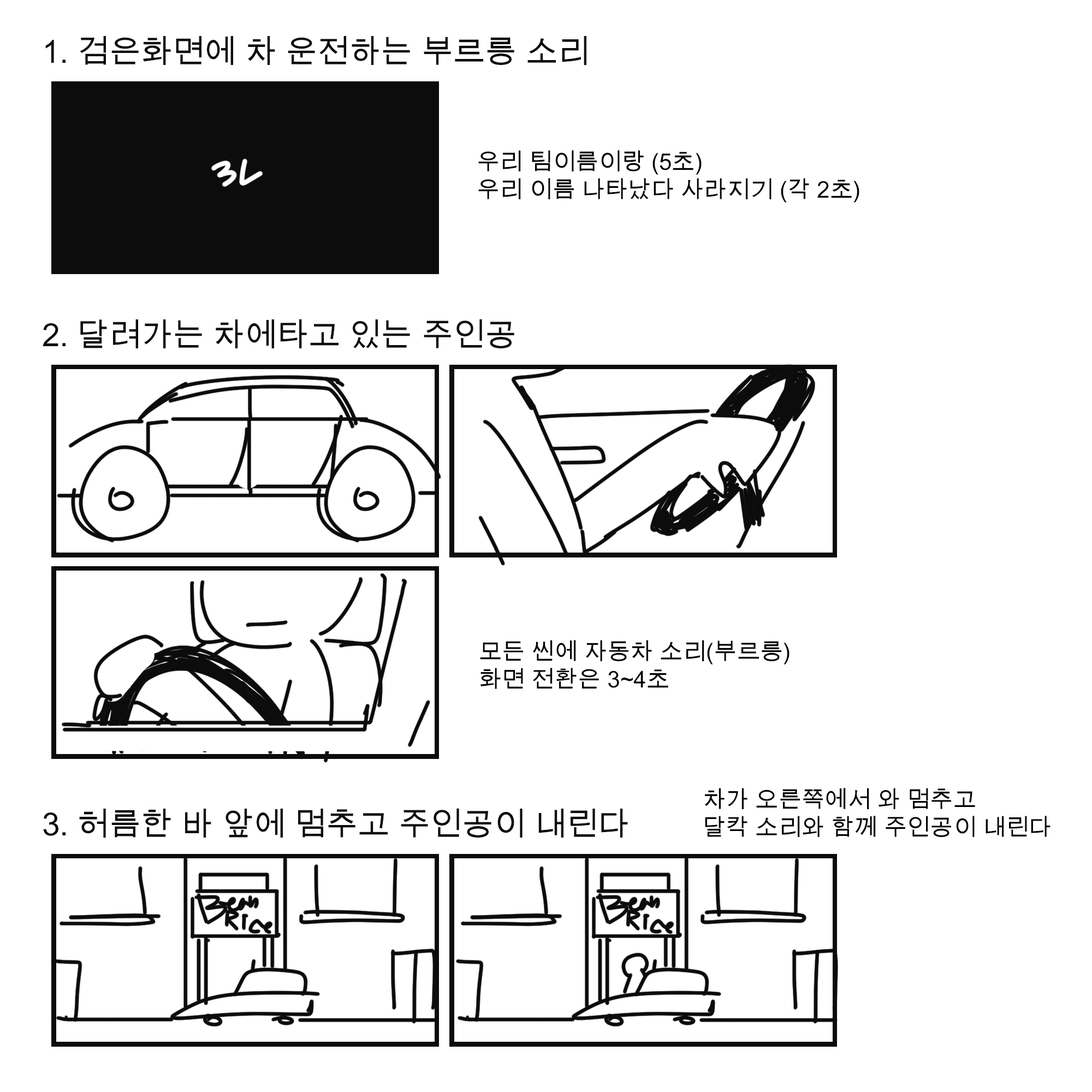
<style>
.page{position:relative;width:1092px;height:1092px;background:#ffffff}
.page>*{position:absolute;margin:0}
.t1{font:31.8px "ArialUnicodeMS";color:#0c0c0c}
.t2{font:23.1px "ArialUnicodeMS";color:#000000}
</style>
<div class="page">
<p class="t1" style="left:45px;top:36px;width:541px;height:30px">1. 검은화면에 차 운전하는 부르릉 소리</p>
<p class="t2" style="left:478px;top:150px;width:381px;height:53px">우리 팀이름이랑 (5초)<br>우리 이름 나타났다 사라지기 (각 2초)</p>
<p class="t1" style="left:43px;top:319px;width:471px;height:29px">2. 달려가는 차에타고 있는 주인공</p>
<p class="t2" style="left:480px;top:640px;width:310px;height:49px">모든 씬에 자동차 소리(부르릉)<br>화면 전환은 3~4초</p>
<p class="t2" style="left:705px;top:788px;width:345px;height:49px">차가 오른쪽에서 와 멈추고<br>달칵 소리와 함께 주인공이 내린다</p>
<p class="t1" style="left:43px;top:808px;width:585px;height:30px">3. 허름한 바 앞에 멈추고 주인공이 내린다</p>
</div>
